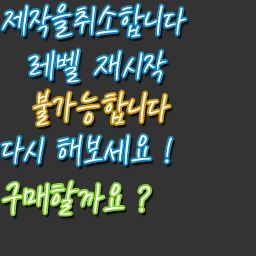
<style>
.page{position:relative;width:256px;height:256px;background:#333333}
.page>*{position:absolute;margin:0}
.t1{font:41.3px "KCC-eunyoung-Regular";color:#ffffff}
</style>
<div class="page">
<p class="t1" style="left:2px;top:3px;width:184px;height:35px">제작을취소합니다</p>
<p class="t1" style="left:29px;top:49px;width:137px;height:34px">레벨 재시작</p>
<p class="t1" style="left:33px;top:90px;width:137px;height:36px">불가능합니다</p>
<p class="t1" style="left:2px;top:135px;width:170px;height:31px">다시 해보세요 !</p>
<p class="t1" style="left:3px;top:181px;width:147px;height:34px">구매할까요 ?</p>
</div>
